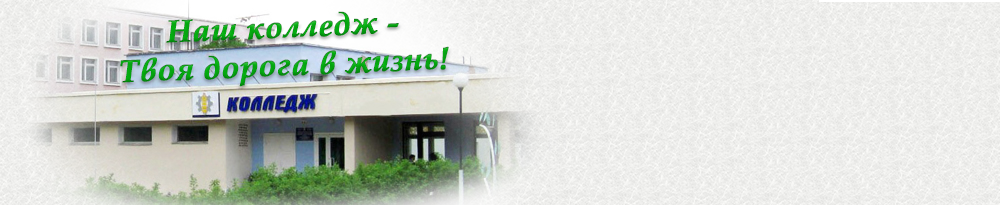
<style>
.page{position:relative;width:1000px;height:205px}
.page>*{position:absolute;margin:0}
.t1{font:31.8px "BookAntiqua-BoldItalic";color:#05af11;font-weight:bold}
</style>
<div class="page">
<p class="t1" style="left:120px;top:11px;width:329px;height:76px;text-align:center;rotate:-2deg">Наш колледж -<br>Твоя дорога в жизнь!</p>
</div>
